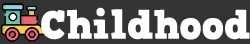
<style>
.page{position:relative;width:250px;height:44px;background:#333333}
.page>*{position:absolute;margin:0}
.t1{font:40px "HVDComicSerifPro";letter-spacing:0.01em;color:#ffffff}
</style>
<div class="page">
<p class="t1" style="left:41px;top:7px;width:209px;height:33px">Childhood</p>
</div>
